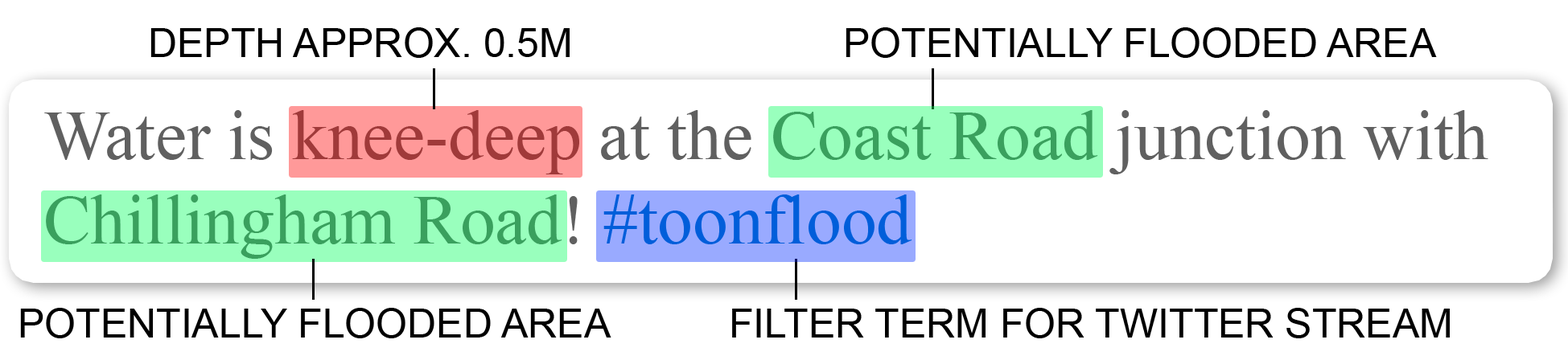
<style>
.page{position:relative;width:1568px;height:356px;background:#ffffff}
.page>*{position:absolute;margin:0}
.t1{font:40.2px "ArialMT";color:#000000;text-transform:uppercase}
.t2{font:70.4px "TimesNewRomanPSMT"}
</style>
<div class="page">
<p class="t1" style="left:150px;top:27px;width:420px;height:31px">Depth approx. 0.5m</p>
<p class="t1" style="left:846px;top:27px;width:591px;height:31px">Potentially flooded area</p>
<p class="t2" style="left:44px;top:110px;width:1444px;height:149px">Water is knee-deep at the Coast Road junction with<br>Chillingham Road! #toonflood</p>
<p class="t1" style="left:20px;top:308px;width:591px;height:31px">Potentially flooded area</p>
<p class="t1" style="left:732px;top:308px;width:718px;height:31px">filter term for twitter stream</p>
</div>
